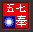
<style>
.page{position:relative;width:33px;height:32px;background:#f20000}
.page>*{position:absolute;margin:0}
.t1{font:10.4px "SimSun";color:#ffffff}
.t2{font:11.7px "SimSun";color:#ffffff}
</style>
<div class="page">
<p class="t1" style="left:7px;top:4px;width:19px;height:8px">五七</p>
<p class="t2" style="left:16px;top:15px;width:11px;height:12px">奉</p>
</div>
